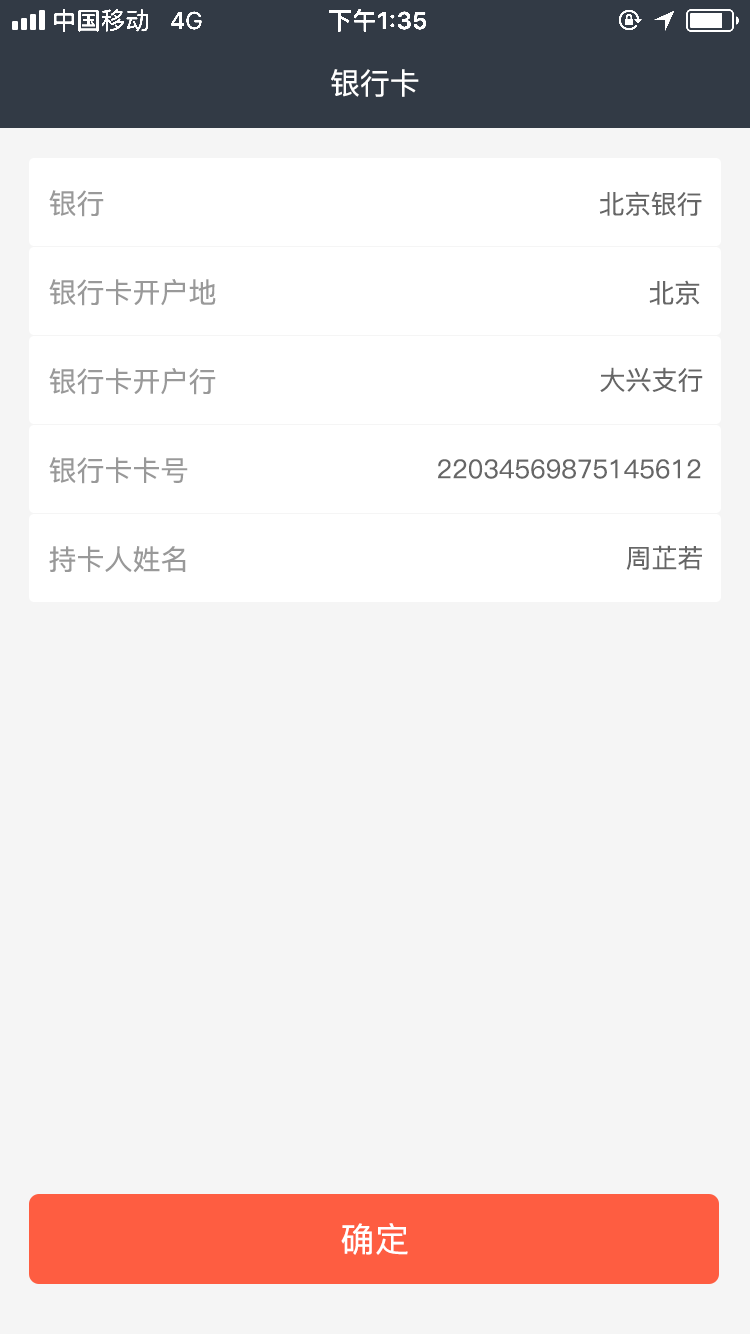
<style>
.page{position:relative;width:750px;height:1334px;background:#f5f5f5}
.page>*{position:absolute;margin:0}
.t1{font:30px "PingFang-SC-Medium";color:#ffffff}
.t2{font:26px "PingFang-SC-Medium";color:#666666}
.t3{font:28px "PingFang-SC-Medium";color:#999999}
.t4{font:34px "PingFang-SC-Medium";letter-spacing:0.02em;color:#ffffff}
</style>
<div class="page">
<p class="t1" style="left:331px;top:69px;width:88px;height:28px">银行卡</p>
<p class="t2" style="left:49px;top:190px;width:653px;height:27px"><span class="t3">银行                                                     </span>北京银行</p>
<p class="t3" style="left:49px;top:279px;width:167px;height:27px">银行卡开户地</p>
<p class="t2" style="left:649px;top:280px;width:51px;height:25px">北京</p>
<p class="t3" style="left:49px;top:368px;width:167px;height:27px">银行卡开户行</p>
<p class="t2" style="left:600px;top:367px;width:103px;height:25px">大兴支行</p>
<p class="t3" style="left:49px;top:457px;width:139px;height:27px">银行卡卡号</p>
<p class="t2" style="left:438px;top:459px;width:263px;height:20px">22034569875145612</p>
<p class="t2" style="left:626px;top:545px;width:76px;height:25px">周芷若</p>
<p class="t3" style="left:49px;top:546px;width:137px;height:27px">持卡人姓名</p>
<p class="t4" style="left:341px;top:1223px;width:67px;height:32px">确定</p>
</div>
